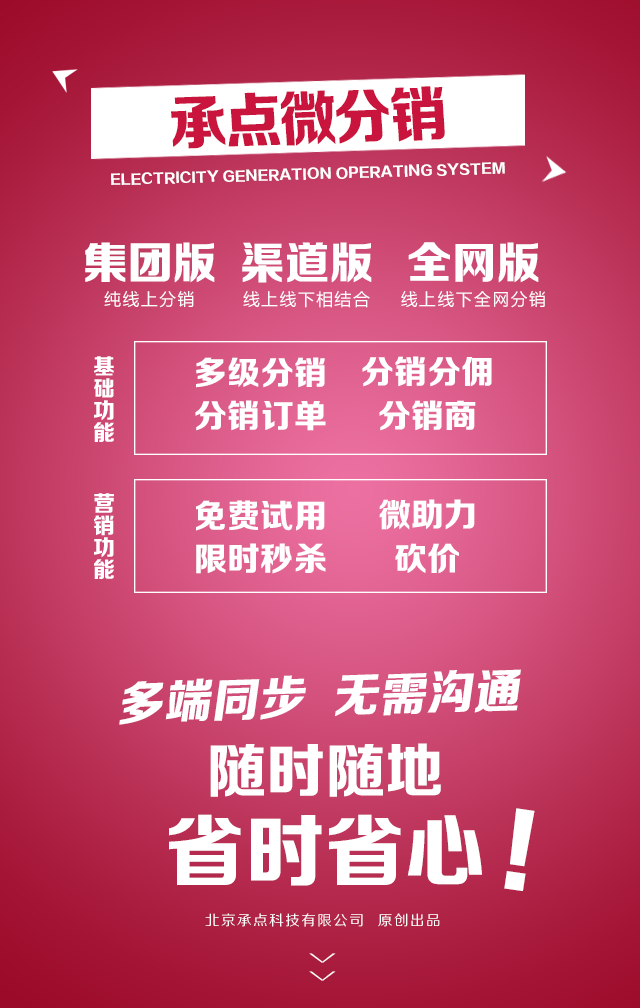
<style>
.page{position:relative;width:640px;height:1008px}
.page>*{position:absolute;margin:0}
.t1{font:60.1px "FZZDHJW--GB1-0";letter-spacing:-0.05em;color:#c9143d;text-transform:uppercase;scale:0.97 1}
.t2{font:13.4px "FZZDHJW--GB1-0";letter-spacing:0.005em;color:#ffffff;text-transform:uppercase}
.t3{font:44.3px "FZZDHJW--GB1-0";letter-spacing:0.005em;color:#ffffff;text-transform:uppercase}
.t4{font:16.7px "MicrosoftYaHei";letter-spacing:0.1em;color:#ffffff;text-transform:uppercase}
.t5{font:32.6px "FZZDHJW--GB1-0";letter-spacing:0.005em;color:#ffffff;text-transform:uppercase}
.t6{font:47.9px "FZZDHJW--GB1-0";letter-spacing:0.005em;color:#ffffff;text-transform:uppercase}
.t7{font:58.6px "FZZDHJW--GB1-0";letter-spacing:0.005em;color:#ffffff;text-transform:uppercase}
.t8{font:96.1px "FZZDHJW--GB1-0";letter-spacing:0.005em;color:#ffffff;text-transform:uppercase}
.t9{font:79.5px "FZZDHJW--GB1-0";letter-spacing:0.005em;color:#ffffff;text-transform:uppercase}
.t10{font:14.2px "FZZHJW--GB1-0";letter-spacing:0.1em;color:#ffffff;text-transform:uppercase}
.t11{font:36.8px "FZZXHJW--GB1-0";letter-spacing:0.5em;color:#ffffff;text-transform:uppercase;scale:0.44 1}
</style>
<div class="page">
<p class="t1" style="left:171px;top:86px;width:274px;height:63px;rotate:-2deg">承点微分销</p>
<p class="t2" style="left:111px;top:162px;width:394px;height:23px;rotate:-2deg">Electricity generation operating system</p>
<p class="t3" style="left:85px;top:242px;width:130px;height:41px">集团版</p>
<p class="t3" style="left:242px;top:242px;width:130px;height:41px">渠道版</p>
<p class="t3" style="left:408px;top:242px;width:131px;height:41px">全网版</p>
<p class="t4" style="left:104px;top:291px;width:90px;height:17px">纯线上分销</p>
<p class="t4" style="left:243px;top:291px;width:127px;height:17px">线上线下相结合</p>
<p class="t4" style="left:401px;top:291px;width:144px;height:17px">线上线下全网分销</p>
<p class="t5" style="left:196px;top:357px;width:129px;height:31px">多级分销</p>
<p class="t5" style="left:362px;top:356px;width:130px;height:31px">分销分佣</p>
<p class="t5" style="left:195px;top:400px;width:131px;height:31px">分销订单</p>
<p class="t5" style="left:379px;top:400px;width:97px;height:31px">分销商</p>
<p class="t5" style="left:196px;top:500px;width:129px;height:31px">免费试用</p>
<p class="t5" style="left:379px;top:499px;width:96px;height:31px">微助力</p>
<p class="t5" style="left:196px;top:543px;width:130px;height:31px">限时秒杀</p>
<p class="t5" style="left:395px;top:543px;width:64px;height:31px">砍价</p>
<p class="t6" style="left:119px;top:669px;width:402px;height:56px;rotate:-2deg">多端同步  无需沟通</p>
<p class="t7" style="left:210px;top:743px;width:231px;height:54px">随时随地</p>
<p class="t8" style="left:504px;top:808px;width:31px;height:83px;rotate:8deg">!</p>
<p class="t9" style="left:169px;top:814px;width:313px;height:72px">省时省心</p>
<p class="t10" style="left:205px;top:913px;width:235px;height:14px">北京承点科技有限公司  原创出品</p>
<p class="t11" style="left:309px;top:953px;width:27px;height:28px;rotate:90deg">&gt;&gt;</p>
</div>
